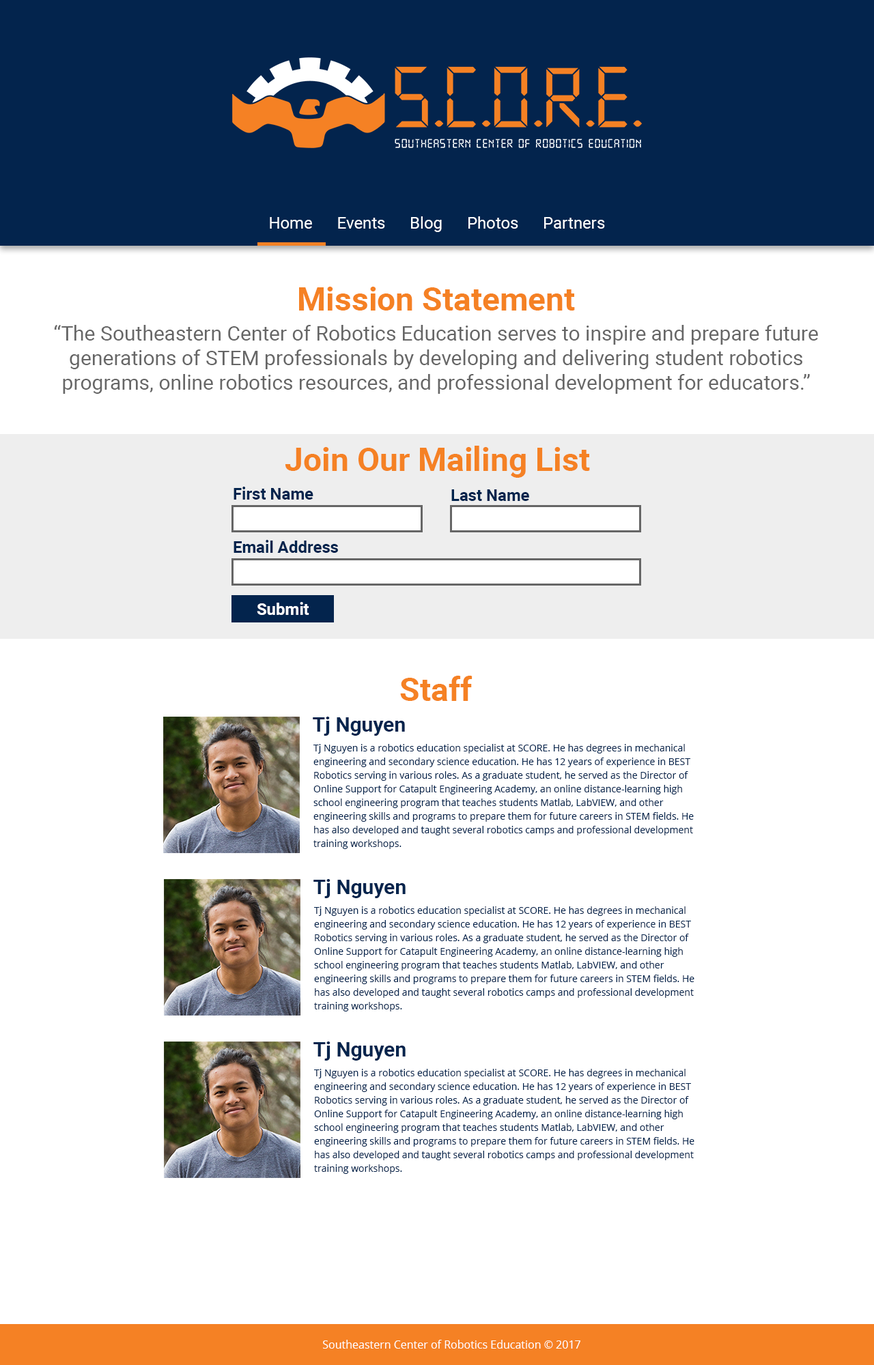
<style>
.page{position:relative;width:874px;height:1365px;background:#ffffff}
.page>*{position:absolute;margin:0}
.t1{font:16.4px "Roboto-Regular";color:#ffffff}
.t2{font:32.8px "Roboto-Bold";color:#f58124}
.t3{font:20.5px/24.6px "Roboto-Regular";color:#666666}
.t4{font:16.4px "Roboto-Bold";color:#03244d}
.t5{font:16.4px "Roboto-Bold";color:#ffffff}
.t6{font:20.5px "Roboto-Bold";color:#03244d}
.t7{font:9.6px/13.6px "OpenSans";color:#03244d}
.t8{font:10.9px "OpenSans";color:#ffffff}
</style>
<div class="page">
<p class="t1" style="left:270px;top:216px;width:335px;height:16px">Home      Events      Blog      Photos      Partners</p>
<p class="t2" style="left:299px;top:287px;width:276px;height:24px">Mission Statement</p>
<p class="t3" style="left:54px;top:325px;width:764px;height:69px;text-align:center">“The Southeastern Center of Robotics Education serves to inspire and prepare future<br>generations of STEM professionals by developing and delivering student robotics<br>programs, online robotics resources, and professional development for educators.”</p>
<p class="t2" style="left:285px;top:446px;width:305px;height:32px">Join Our Mailing List</p>
<p class="t4" style="left:233px;top:487px;width:80px;height:13px">First Name</p>
<p class="t4" style="left:451px;top:489px;width:78px;height:12px">Last Name</p>
<p class="t4" style="left:233px;top:540px;width:105px;height:13px">Email Address</p>
<p class="t5" style="left:257px;top:602px;width:52px;height:13px">Submit</p>
<p class="t2" style="left:400px;top:676px;width:72px;height:25px">Staff</p>
<p class="t6" style="left:313px;top:717px;width:92px;height:19px">Tj Nguyen</p>
<p class="t7" style="left:313px;top:744px;width:380px;height:105px">Tj Nguyen is a robotics education specialist at SCORE. He has degrees in mechanical<br>engineering and secondary science education. He has 12 years of experience in BEST<br>Robotics serving in various roles. As a graduate student, he served as the Director of<br>Online Support for Catapult Engineering Academy, an online distance-learning high<br>school engineering program that teaches students Matlab, LabVIEW, and other<br>engineering skills and programs to prepare them for future careers in STEM fields. He<br>has also developed and taught several robotics camps and professional development <br>training workshops.</p>
<p class="t6" style="left:313px;top:879px;width:92px;height:19px">Tj Nguyen</p>
<p class="t7" style="left:314px;top:906px;width:380px;height:105px">Tj Nguyen is a robotics education specialist at SCORE. He has degrees in mechanical<br>engineering and secondary science education. He has 12 years of experience in BEST<br>Robotics serving in various roles. As a graduate student, he served as the Director of<br>Online Support for Catapult Engineering Academy, an online distance-learning high<br>school engineering program that teaches students Matlab, LabVIEW, and other<br>engineering skills and programs to prepare them for future careers in STEM fields. He<br>has also developed and taught several robotics camps and professional development <br>training workshops.</p>
<p class="t6" style="left:313px;top:1041px;width:92px;height:20px">Tj Nguyen</p>
<p class="t7" style="left:314px;top:1069px;width:380px;height:105px">Tj Nguyen is a robotics education specialist at SCORE. He has degrees in mechanical<br>engineering and secondary science education. He has 12 years of experience in BEST<br>Robotics serving in various roles. As a graduate student, he served as the Director of<br>Online Support for Catapult Engineering Academy, an online distance-learning high<br>school engineering program that teaches students Matlab, LabVIEW, and other<br>engineering skills and programs to prepare them for future careers in STEM fields. He<br>has also developed and taught several robotics camps and professional development <br>training workshops.</p>
<p class="t8" style="left:323px;top:1340px;width:257px;height:9px">Southeastern Center of Robotics Education © 2017</p>
</div>
